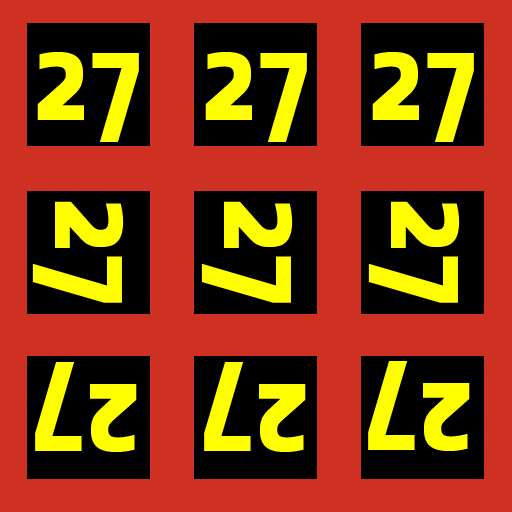
<style>
.page{position:relative;width:512px;height:512px;background:#ce3122}
.page>*{position:absolute;margin:0}
.t1{font:130px "Share-BoldOSF";color:#ffff00}
</style>
<div class="page">
<p class="t1" style="left:37px;top:51px;width:102px;height:92px">27</p>
<p class="t1" style="left:205px;top:51px;width:102px;height:92px">27</p>
<p class="t1" style="left:372px;top:51px;width:102px;height:92px">27</p>
<p class="t1" style="left:32px;top:201px;width:92px;height:102px;rotate:90deg">27</p>
<p class="t1" style="left:201px;top:201px;width:92px;height:102px;rotate:90deg">27</p>
<p class="t1" style="left:368px;top:201px;width:92px;height:102px;rotate:90deg">27</p>
<p class="t1" style="left:35px;top:361px;width:102px;height:92px;rotate:-180deg">27</p>
<p class="t1" style="left:204px;top:361px;width:102px;height:92px;rotate:-180deg">27</p>
<p class="t1" style="left:368px;top:360px;width:102px;height:92px;rotate:-180deg">27</p>
</div>
